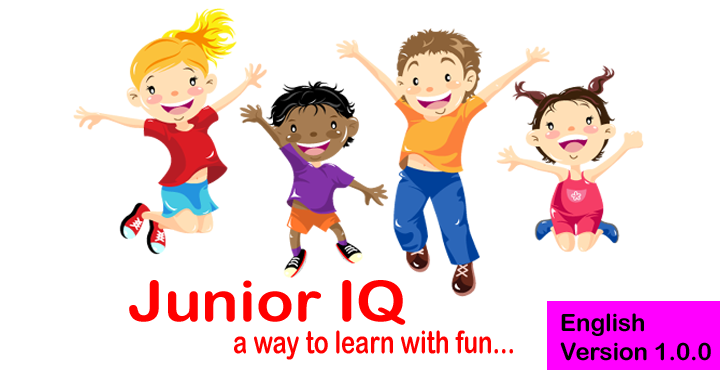
<style>
.page{position:relative;width:720px;height:370px;background:#ffffff}
.page>*{position:absolute;margin:0}
.t1{font:56.2px "ArialRoundedMTBold";color:#ff0000;scale:1.11 1}
.t2{font:24px "ArialRoundedMTBold";color:#000000}
.t3{font:31.1px "ArialRoundedMTBold";color:#ff0000;scale:0.77 1}
</style>
<div class="page">
<p class="t1" style="left:129px;top:280px;width:277px;height:45px">Junior IQ</p>
<p class="t2" style="left:560px;top:313px;width:151px;height:48px">English<br>Version 1.0.0</p>
<p class="t3" style="left:234px;top:330px;width:279px;height:30px">a way to learn with fun...</p>
</div>
